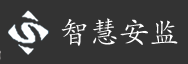
<style>
.page{position:relative;width:188px;height:64px;background:#333333}
.page>*{position:absolute;margin:0}
.t1{font:30px "STKaiti";color:#ffffff}
</style>
<div class="page">
<p class="t1" style="left:61px;top:18px;width:117px;height:28px">智慧安监</p>
</div>
